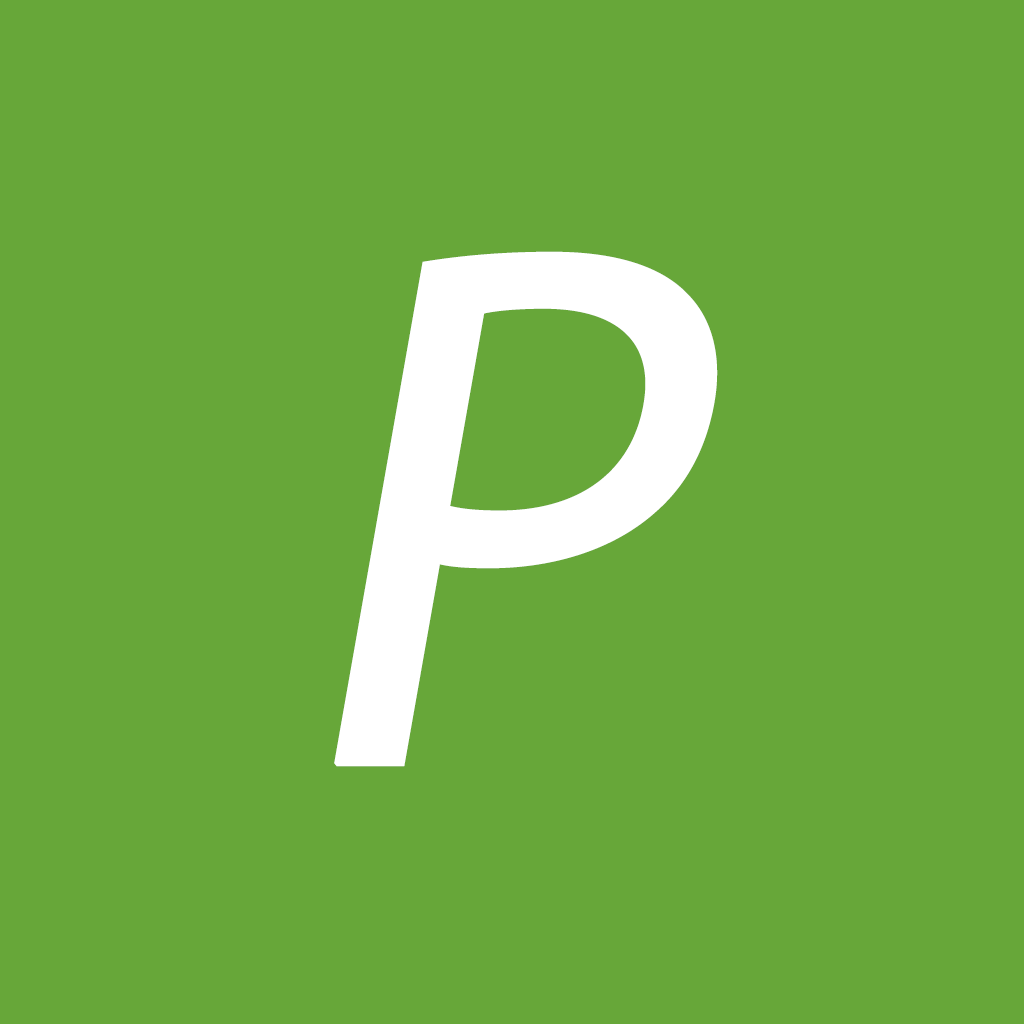
<style>
.page{position:relative;width:1024px;height:1024px;background:#67a739}
.page>*{position:absolute;margin:0}
.t1{font:750px "MyriadPro-Regular";letter-spacing:-0.05em;color:#ffffff;font-weight:bold;font-style:italic}
</style>
<div class="page">
<p class="t1" style="left:334px;top:251px;width:384px;height:516px">P</p>
</div>
